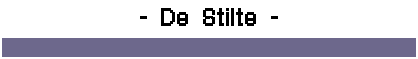
<style>
.page{position:relative;width:418px;height:59px;background:#ffffff}
.page>*{position:absolute;margin:0}
.t1{font:24px "C&CRedAlert[LAN]";color:#000000;font-weight:bold}
</style>
<div class="page">
<p class="t1" style="left:140px;top:8px;width:138px;height:18px">- De Stilte -</p>
</div>
